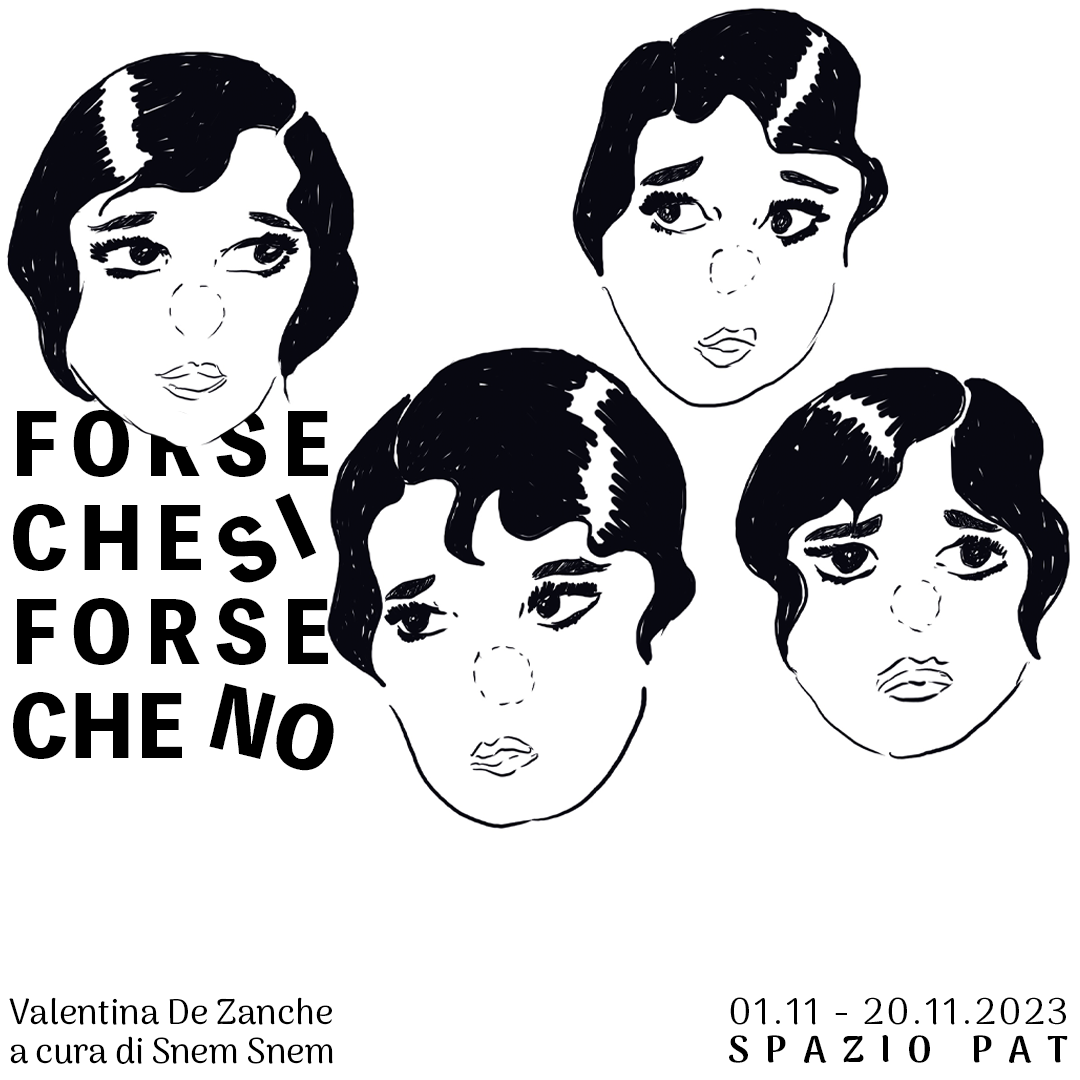
<style>
.page{position:relative;width:1080px;height:1080px;background:#ffffff}
.page>*{position:absolute;margin:0}
.t1{font:83.7px/94px "ToppanBunkyuMidashiGothicStdN-ExtraBold";letter-spacing:0.112em;color:#000000}
.t2{font:83.7px/94px "ToppanBunkyuMidashiGothicStdN-ExtraBold";letter-spacing:0.151em;color:#000000}
.t3{font:83.7px/94px "ToppanBunkyuMidashiGothicStdN-ExtraBold";color:#000000}
.t4{font:83.7px "ToppanBunkyuMidashiGothicStdN-ExtraBold";letter-spacing:0.151em;color:#000000}
.t5{font:83.7px "ToppanBunkyuMidashiGothicStdN-ExtraBold";color:#000000}
.t6{font:35.7px/38.5px "ArimaMadurai-Regular";letter-spacing:0.001em;color:#000000}
.t7{font:35.7px/38.5px "ArimaMadurai-Regular";letter-spacing:-0.011em;color:#000000}
.t8{font:37.4px/38px "ArimaMadurai-Regular";letter-spacing:0.073em;color:#000000}
.t9{font:37.4px/38px "ArimaMadurai-Black";letter-spacing:0.42em;color:#000000}
</style>
<div class="page">
<p class="t1" style="left:13px;top:410px;width:315px;height:349px"><span class="t2">FORSE<br></span>CHE SI<br><span class="t2">FORSE<br></span><span class="t3">CHE NO</span></p>
<p class="t4" style="left:218px;top:493px;width:99px;height:90px;rotate:-24deg">SI</p>
<p class="t5" style="left:209px;top:683px;width:125px;height:88px;rotate:14deg">NO</p>
<p class="t6" style="left:9px;top:997px;width:324px;height:67px">Valentina De Zanche<br><span class="t7">a cura di Snem Snem</span></p>
<p class="t8" style="left:729px;top:997px;width:339px;height:66px">01.11 - 20.11.2023<br><span class="t9">SPAZIO PAT</span></p>
</div>
